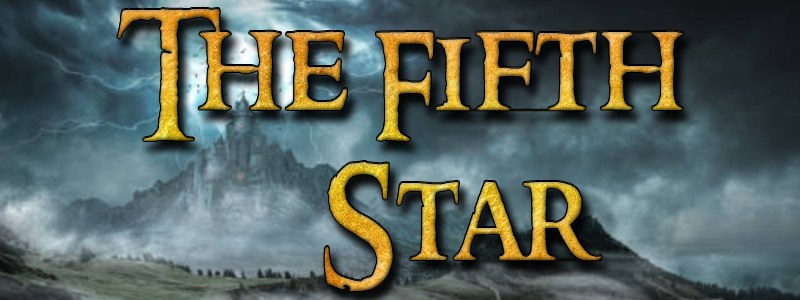
<style>
.page{position:relative;width:800px;height:300px}
.page>*{position:absolute;margin:0}
.t1{font:125px "RingbearerMedium"}
</style>
<div class="page">
<p class="t1" style="left:117px;top:7px;width:566px;height:283px;text-align:center">The Fifth<br>    Star</p>
<p class="t1" style="left:117px;top:8px;width:566px;height:283px;text-align:center">The Fifth<br>    Star</p>
</div>
